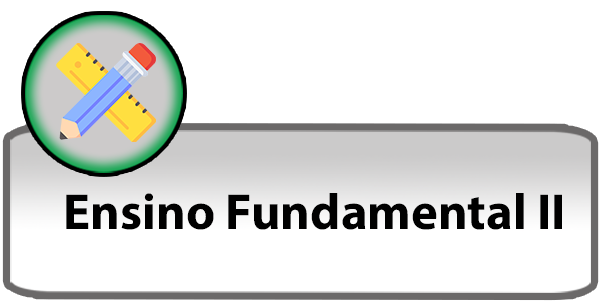
<style>
.page{position:relative;width:600px;height:307px;background:#ffffff}
.page>*{position:absolute;margin:0}
.t1{font:50.8px "MyriadConceptRoman-Bold";color:#000000}
</style>
<div class="page">
<p class="t1" style="left:66px;top:193px;width:496px;height:37px">Ensino Fundamental II</p>
</div>
